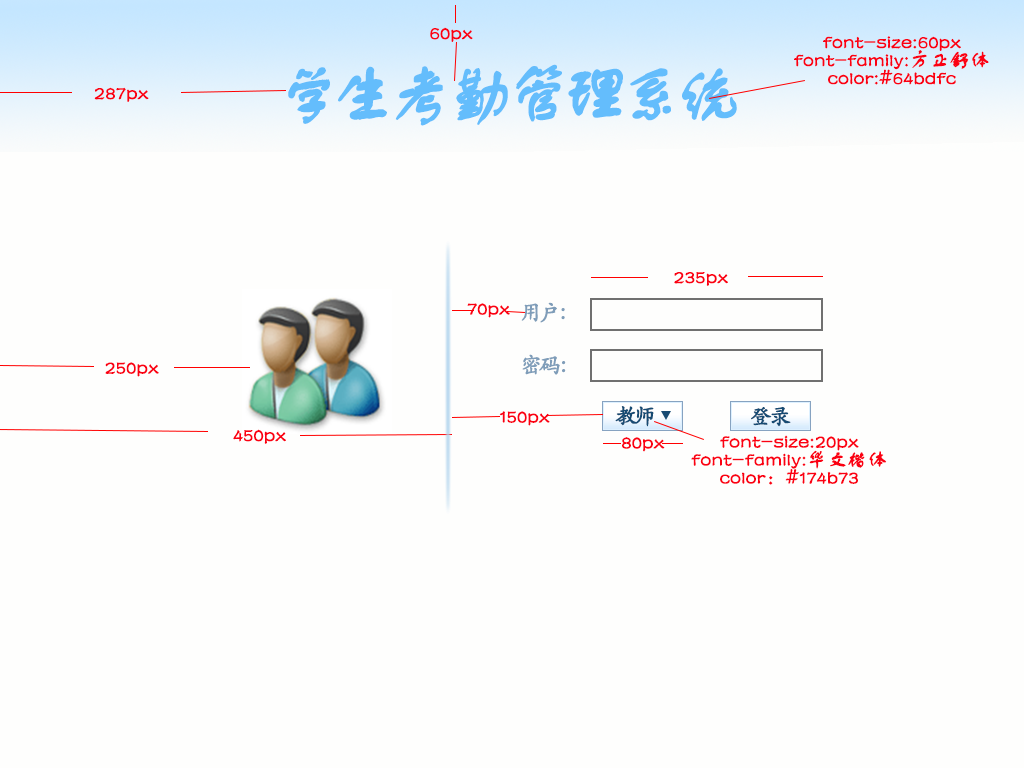
<style>
.page{position:relative;width:1024px;height:768px;background:#fefefd}
.page>*{position:absolute;margin:0}
.t1{font:19.6px "FZSTK--GBK1-0";color:#fb0012;font-weight:bold}
.t2{font:19.6px/18px "FZSTK--GBK1-0";color:#fb0012;font-weight:bold}
.t3{font:65.4px "FZSTK--GBK1-0";letter-spacing:-0.15em;color:#64bdfc;font-weight:bold}
.t4{font:21.8px "STKaiti";letter-spacing:-0.15em;color:#7f9db9;font-weight:bold}
.t5{font:21.8px "STKaiti";letter-spacing:-0.15em;color:#174b73;font-weight:bold}
</style>
<div class="page">
<p class="t1" style="left:430px;top:27px;width:43px;height:15px">60px</p>
<p class="t2" style="left:794px;top:36px;width:195px;height:49px;text-align:center">font-size:60px<br>font-family:方正舒体<br>color:#64bdfc</p>
<p class="t3" style="left:288px;top:64px;width:449px;height:62px">学生考勤管理系统</p>
<p class="t1" style="left:94px;top:87px;width:55px;height:15px">287px</p>
<p class="t1" style="left:674px;top:272px;width:54px;height:14px">235px</p>
<p class="t1" style="left:467px;top:303px;width:43px;height:15px">70px</p>
<p class="t4" style="left:521px;top:302px;width:44px;height:21px">用户：</p>
<p class="t1" style="left:105px;top:362px;width:54px;height:15px">250px</p>
<p class="t4" style="left:522px;top:354px;width:44px;height:21px">密码：</p>
<p class="t1" style="left:499px;top:411px;width:51px;height:15px">150px</p>
<p class="t5" style="left:615px;top:406px;width:39px;height:21px">教师</p>
<p class="t5" style="left:751px;top:406px;width:40px;height:21px">登录</p>
<p class="t1" style="left:233px;top:429px;width:53px;height:15px">450px</p>
<p class="t1" style="left:622px;top:437px;width:43px;height:15px">80px</p>
<p class="t2" style="left:691px;top:435px;width:196px;height:50px;text-align:center">font-size:20px<br>font-family:华文楷体<br>color：#174b73</p>
</div>
